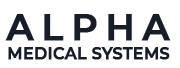
<style>
.page{position:relative;width:180px;height:68px;background:#ffffff}
.page>*{position:absolute;margin:0}
.t1{font:36px "Montserrat-SemiBold";letter-spacing:0.2em;color:#181e29;font-weight:bold}
.t2{font:16px "Montserrat-SemiBold";letter-spacing:-0.005em;color:#181e29;text-transform:uppercase;font-weight:bold}
</style>
<div class="page">
<p class="t1" style="left:5px;top:14px;width:166px;height:27px">ALPHA</p>
<p class="t2" style="left:8px;top:47px;width:162px;height:13px">Medical systems</p>
</div>
